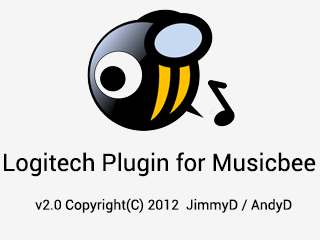
<style>
.page{position:relative;width:320px;height:240px;background:#f5f5f5}
.page>*{position:absolute;margin:0}
.t1{font:24px "Roboto-Regular";color:#000000}
.t2{font:14px "Roboto-Regular";color:#000000}
</style>
<div class="page">
<p class="t1" style="left:4px;top:152px;width:312px;height:25px">Logitech Plugin for Musicbee</p>
<p class="t2" style="left:35px;top:198px;width:257px;height:15px">v2.0 Copyright(C) 2012  JimmyD / AndyD</p>
</div>
